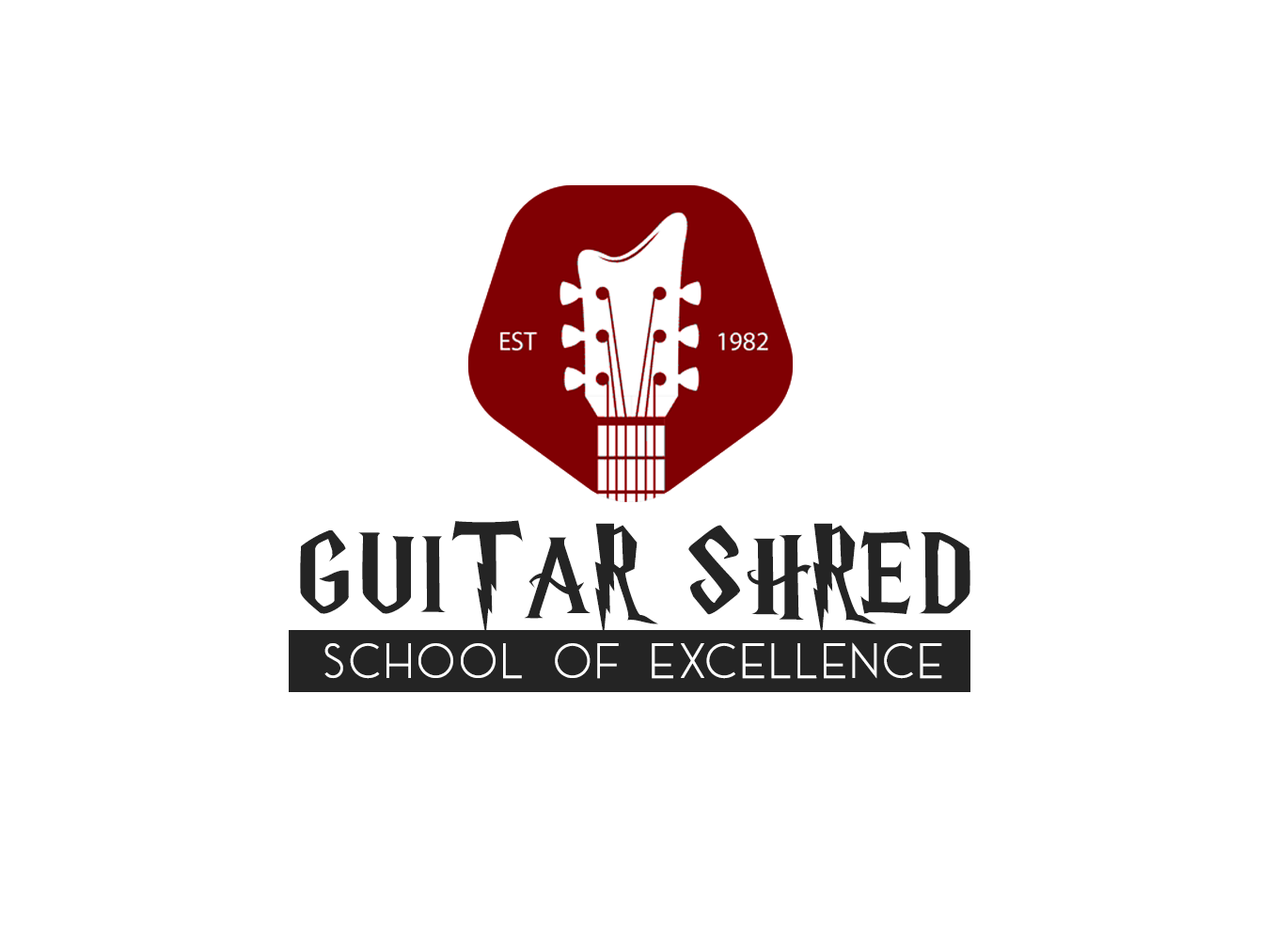
<style>
.page{position:relative;width:1261px;height:946px;background:#ffffff}
.page>*{position:absolute;margin:0}
.t1{font:115.9px "HarryP";letter-spacing:0.05em;color:#242424}
.t2{font:50.9px "AceSansDemo";letter-spacing:0.05em;color:#ffffff}
</style>
<div class="page">
<p class="t1" style="left:300px;top:520px;width:670px;height:116px">GUITAR SHRED</p>
<p class="t2" style="left:324px;top:642px;width:618px;height:37px">SCHOOL OF EXCELLENCE</p>
</div>
